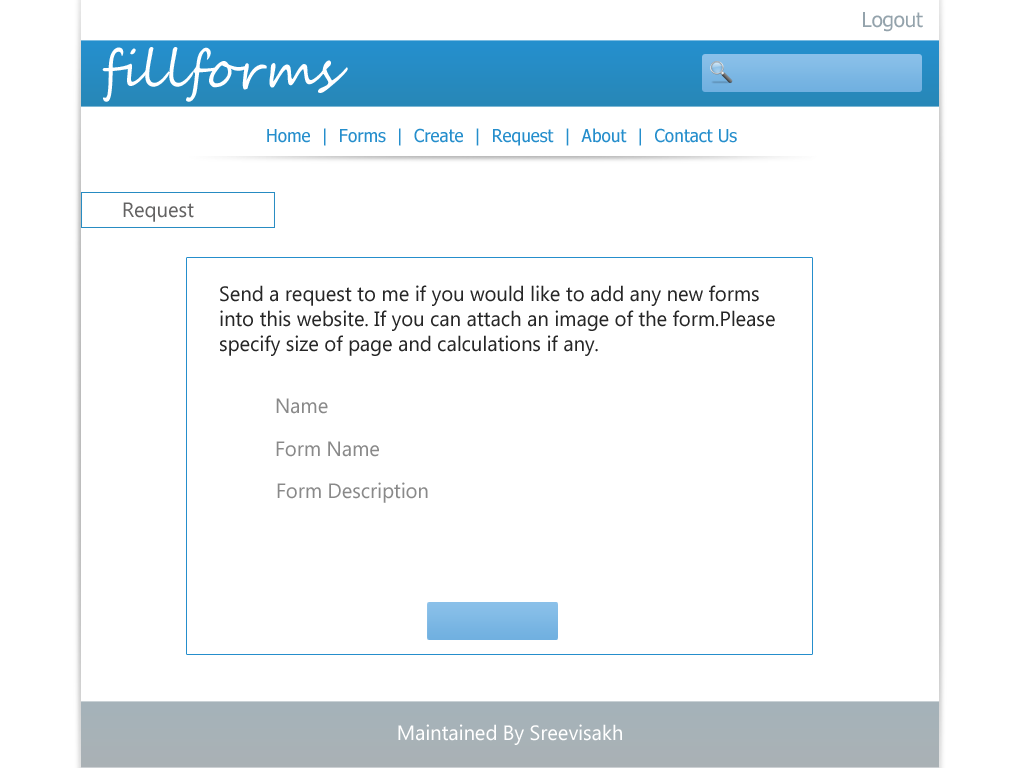
<style>
.page{position:relative;width:1024px;height:768px;background:#ffffff}
.page>*{position:absolute;margin:0}
.t1{font:20.8px "Tahoma";color:#94a3ac;scale:0.97 1}
.t2{font:53.8px "SegoeScript";color:#ffffff;scale:0.97 1}
.t3{font:17.8px "Tahoma";color:#258ecc;scale:0.97 1}
.t4{font:20.8px "SegoeUI";color:#636262;scale:0.97 1}
.t5{font:20.8px "SegoeUI";color:#262626;scale:0.97 1}
.t6{font:20.8px "SegoeUI";color:#898989;scale:0.97 1}
.t7{font:20.8px "SegoeUI";color:#ffffff;scale:0.97 1}
</style>
<div class="page">
<p class="t1" style="left:863px;top:12px;width:60px;height:20px">Logout</p>
<p class="t2" style="left:102px;top:47px;width:246px;height:55px">fillforms</p>
<p class="t3" style="left:267px;top:128px;width:470px;height:18px">Home  |  Forms  |  Create  |  Request  |  About  |  Contact Us</p>
<p class="t4" style="left:123px;top:202px;width:71px;height:20px">Request</p>
<p class="t5" style="left:220px;top:285px;width:555px;height:71px">Send a request to me if you would like to add any new forms<br>into this website. If you can attach an image of the form.Please<br>specify size of page and calculations if any.</p>
<p class="t6" style="left:276px;top:398px;width:52px;height:16px">Name</p>
<p class="t6" style="left:276px;top:441px;width:103px;height:16px">Form Name</p>
<p class="t6" style="left:277px;top:482px;width:151px;height:21px">Form Description</p>
<p class="t7" style="left:398px;top:724px;width:224px;height:21px">Maintained By Sreevisakh</p>
</div>
